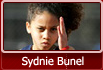
<style>
.page{position:relative;width:103px;height:70px}
.page>*{position:absolute;margin:0}
.t1{font:11px "Tahoma";color:#ffffff}
</style>
<div class="page">
<p class="t1" style="left:22px;top:56px;width:62px;height:12px">Sydnie Bunel</p>
</div>
